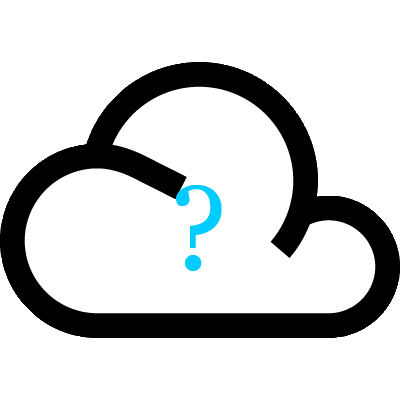
<style>
.page{position:relative;width:400px;height:400px;background:#ffffff}
.page>*{position:absolute;margin:0}
.t1{font:120px "Georgia";color:#00ccff}
</style>
<div class="page">
<p class="t1" style="left:176px;top:185px;width:46px;height:86px">?</p>
</div>
